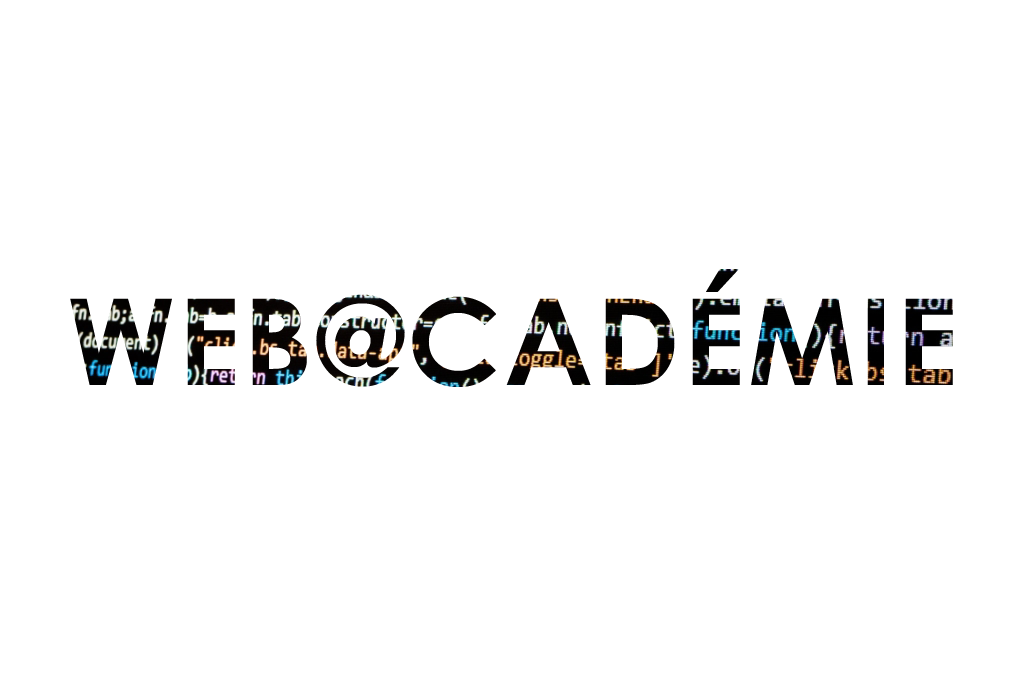
<style>
.page{position:relative;width:1030px;height:687px;background:#ffffff}
.page>*{position:absolute;margin:0}
.t1{font:120px "CenturyGothic-Bold";letter-spacing:0.025em}
</style>
<div class="page">
<p class="t1" style="left:70px;top:269px;width:883px;height:118px">WEB@CADÉMIE</p>
</div>
